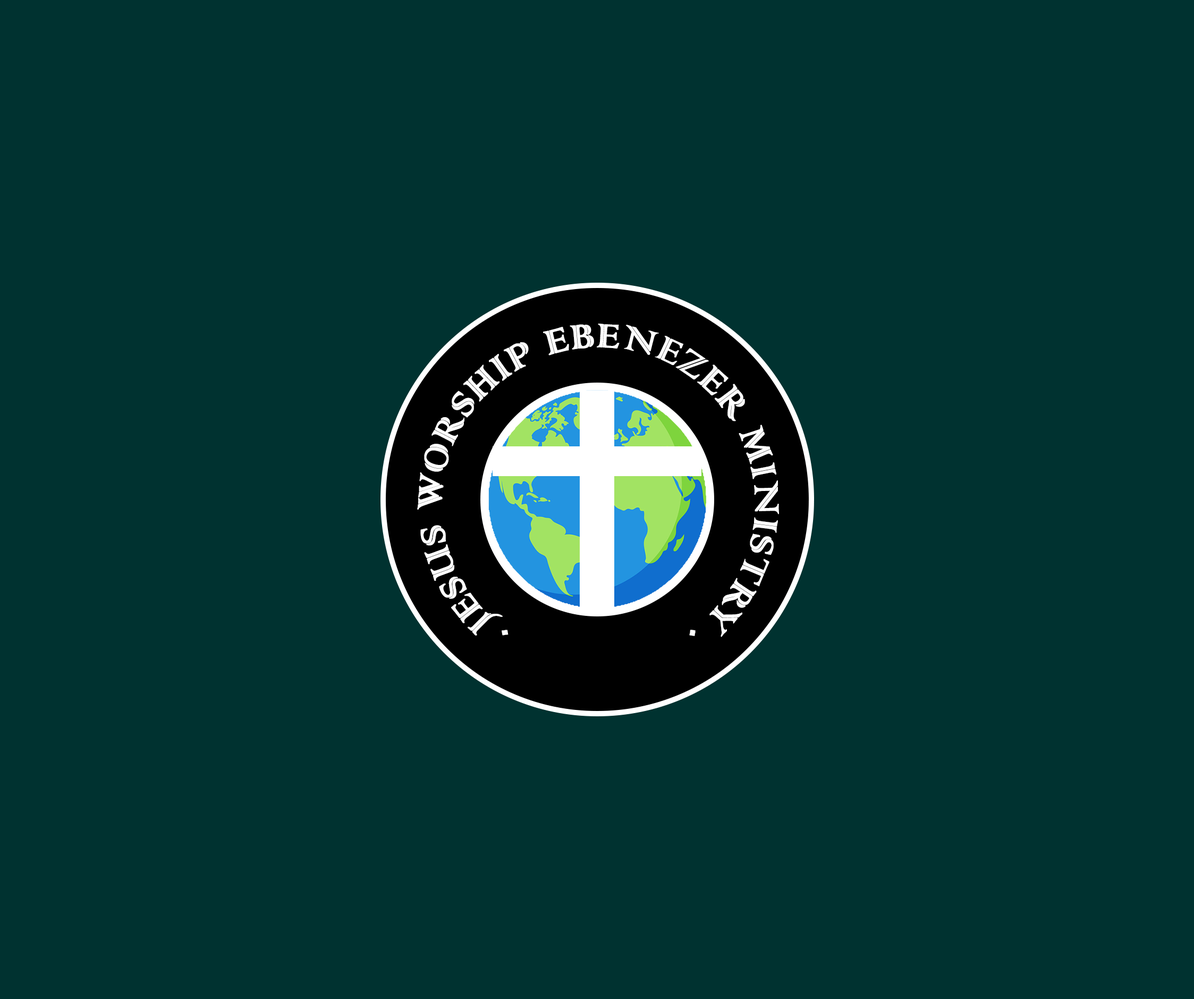
<style>
.page{position:relative;width:1194px;height:999px;background:#003230}
.page>*{position:absolute;margin:0}
.t1{font:44.3px "ColonnaMT";letter-spacing:-0.01em;color:#ffffff;font-weight:bold}
</style>
<div class="page">
<p class="t1" style="left:417px;top:324px;width:362px;height:313px;rotate:1deg">. JESUS WORSHIP EBENEZER MINISTRY .</p>
</div>
